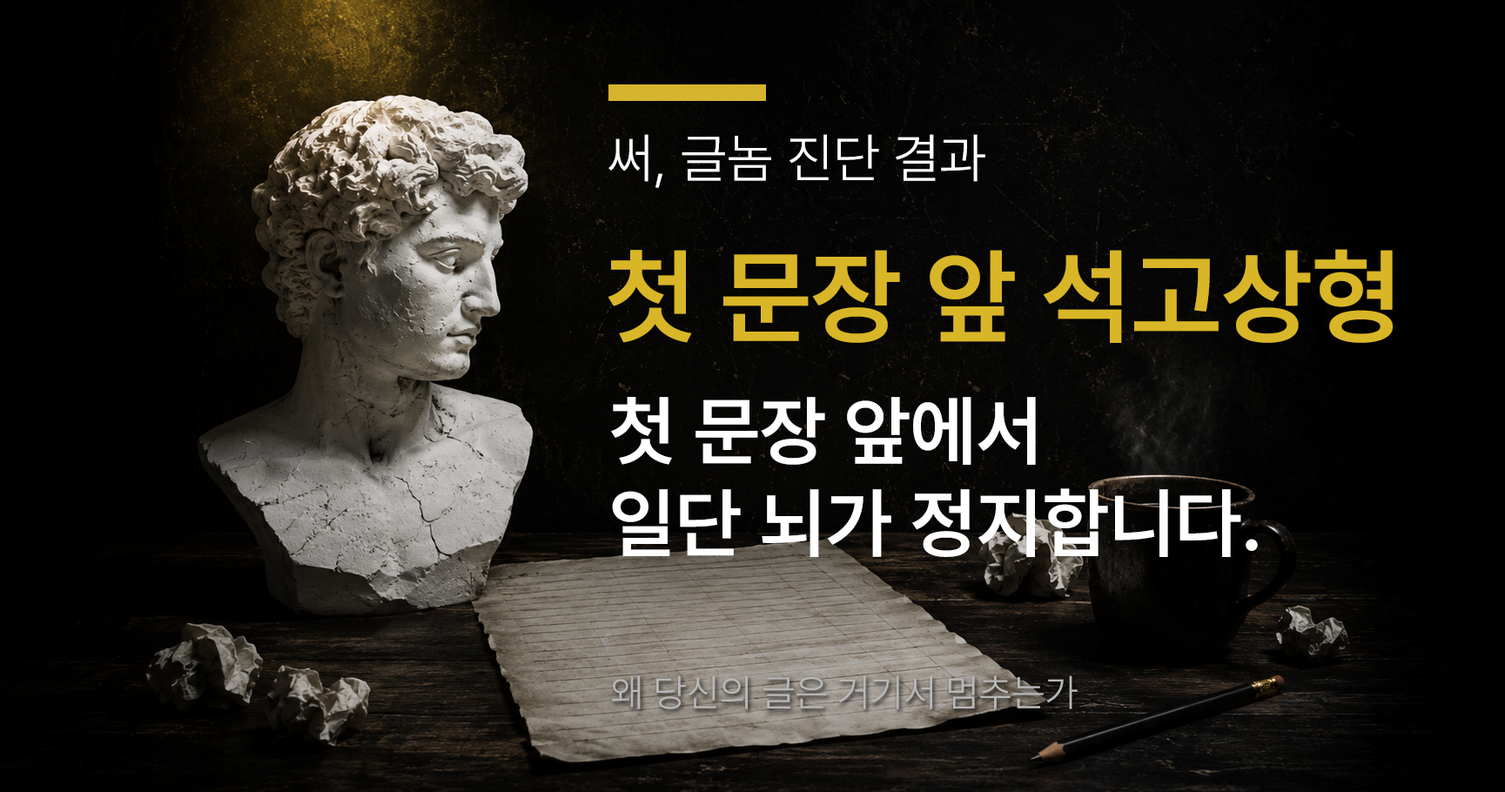
<style>
.page{position:relative;width:1505px;height:792px}
.page>*{position:absolute;margin:0}
.t1{font:54px "Pretendard-Light";color:#ffffff}
.t2{font:104.5px "Pretendard-SemiBold";color:#d9b627}
.t3{font:76.6px/92.3px "Pretendard-SemiBold";color:#ffffff}
.t4{font:38.3px "Pretendard-Light";color:#b8b8b8}
</style>
<div class="page">
<p class="t1" style="left:609px;top:134px;width:376px;height:54px">써, 글놈 진단 결과</p>
<p class="t2" style="left:608px;top:249px;width:785px;height:94px">첫 문장 앞 석고상형</p>
<p class="t3" style="left:611px;top:397px;width:647px;height:160px">첫 문장 앞에서 <br>일단 뇌가 정지합니다.</p>
<p class="t4" style="left:612px;top:676px;width:466px;height:34px">왜 당신의 글은 거기서 멈추는가</p>
</div>
